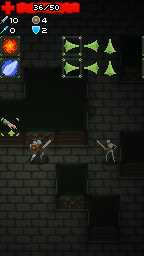
<style>
.page{position:relative;width:144px;height:256px}
.page>*{position:absolute;margin:0}
.t1{font:8px "PFArmaFive";color:#ffffff}
.t2{font:8px "PFTempestaFive";color:#ffffff}
</style>
<div class="page">
<p class="t1" style="left:34px;top:5px;width:25px;height:5px">36/50</p>
<p class="t2" style="left:10px;top:18px;width:8px;height:5px">10</p>
<p class="t2" style="left:10px;top:28px;width:5px;height:5px">0</p>
<p class="t2" style="left:42px;top:18px;width:5px;height:5px">4</p>
<p class="t2" style="left:42px;top:28px;width:5px;height:5px">2</p>
</div>
